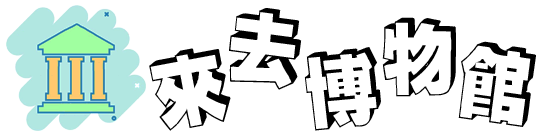
<style>
.page{position:relative;width:536px;height:135px;background:#ffffff}
.page>*{position:absolute;margin:0}
.t1{font:83.3px "ª÷±ö¶W¶Â¥ßÅé¥Õ¦r";letter-spacing:0.1em;color:#000000}
</style>
<div class="page">
<p class="t1" style="left:229px;top:8px;width:73px;height:82px;rotate:8deg">去</p>
<p class="t1" style="left:382px;top:17px;width:74px;height:80px">物</p>
<p class="t1" style="left:458px;top:41px;width:78px;height:86px;rotate:8deg">館</p>
<p class="t1" style="left:149px;top:48px;width:82px;height:83px;rotate:-11deg">來</p>
<p class="t1" style="left:304px;top:47px;width:77px;height:84px;rotate:-5deg">博</p>
</div>
